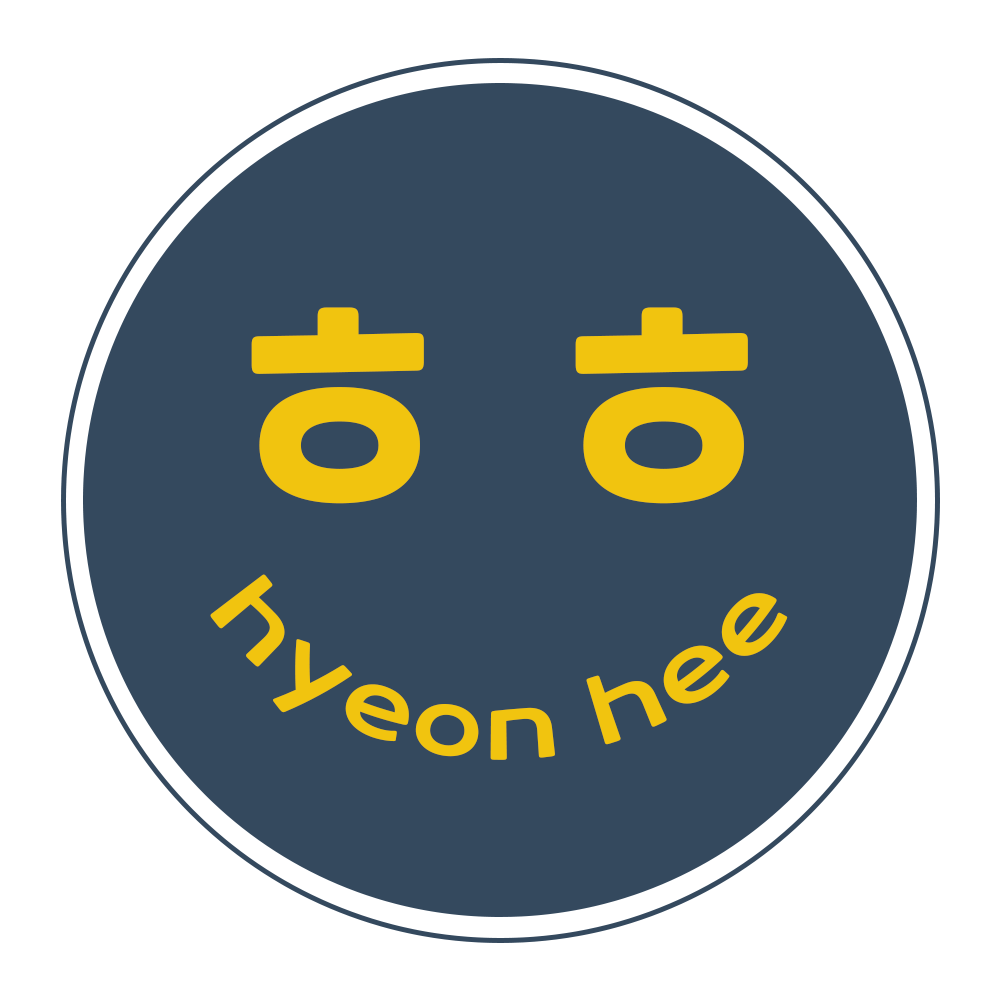
<style>
.page{position:relative;width:1000px;height:1000px;background:#34495e}
.page>*{position:absolute;margin:0}
.t1{font:323.5px "CookieRunOTF-Regular";color:#f1c40f}
.t2{font:90px/100px "CookieRunOTF-Regular";color:#f1c40f}
</style>
<div class="page">
<p class="t1" style="left:251px;top:307px;width:497px;height:197px">ㅎㅎ</p>
<p class="t2" style="left:210px;top:574px;width:578px;height:186px;text-align:center">hyeon hee</p>
</div>
